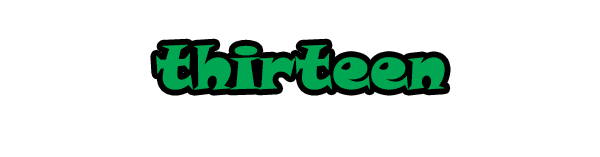
<style>
.page{position:relative;width:600px;height:157px;background:#ffffff}
.page>*{position:absolute;margin:0}
.t1{font:60px "SnapITC-Regular";color:#00a651}
</style>
<div class="page">
<p class="t1" style="left:156px;top:44px;width:289px;height:46px">thirteen</p>
</div>
